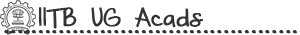
<style>
.page{position:relative;width:300px;height:35px;background:#ffffff}
.page>*{position:absolute;margin:0}
.t1{font:24px "BeautifulEveryTime";color:#343434;font-weight:bold;scale:1.11 1}
</style>
<div class="page">
<p class="t1" style="left:39px;top:7px;width:164px;height:22px">IITB UG Acads</p>
</div>
